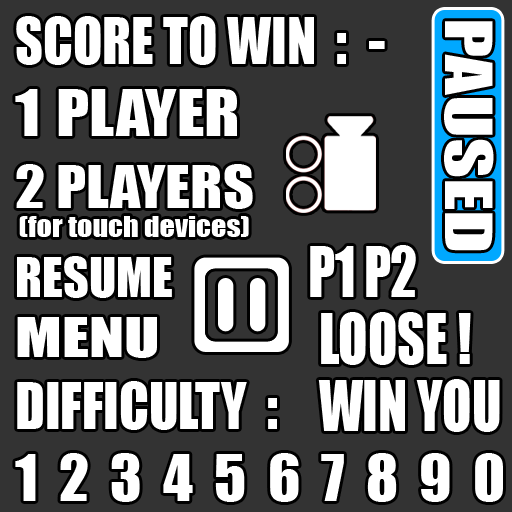
<style>
.page{position:relative;width:512px;height:512px;background:#333333}
.page>*{position:absolute;margin:0}
.t1{font:60px "Impact";color:#ffffff}
.t2{font:60px "Impact";color:#ffffff;scale:0.9 1}
.t3{font:60px "Impact";color:#ffffff;scale:1.1 1}
.t4{font:54px "Impact";color:#ffffff;scale:1.11 1}
.t5{font:27px/29px "Impact";color:#ffffff;scale:1.11 1}
.t6{font:50px "Impact";color:#ffffff}
.t7{font:50px "Impact";color:#ffffff;scale:1.3 1}
.t8{font:60px "Impact";color:#ffffff;scale:1.3 1}
.t9{font:65.3px/67px "Impact";color:#ffffff;scale:0.83 1}
.t10{font:65.3px "Impact";color:#ffffff;scale:0.83 1}
.t11{font:65.3px/65px "Impact";color:#ffffff;scale:0.83 1}
</style>
<div class="page">
<p class="t1" style="left:15px;top:16px;width:488px;height:486px"><span class="t2">SCORE TO WIN  </span>:  - <br><span class="t3">1 PLAYER<br></span><span class="t4">2 PLAYERS<br> </span><span class="t5">(for touch devices)<br></span><span class="t6">RESUME<br></span><span class="t7">MENU <br></span><span class="t2">DIFFICULTY  </span>: <br>1  2  3  4  5  6  7  8  9  0</p>
<p class="t8" style="left:444px;top:21px;width:50px;height:230px;rotate:90deg">PAUSED</p>
<p class="t9" style="left:310px;top:245px;width:190px;height:187px"><span class="t10"><br></span><span class="t11">P1 P2<br> </span>LOOSE !<br> WIN YOU</p>
</div>
